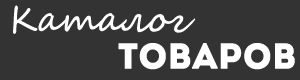
<style>
.page{position:relative;width:300px;height:80px;background:#333333}
.page>*{position:absolute;margin:0}
.t1{font:36px "SegoeScript";color:#ffffff}
.t2{font:36px "Intro";color:#ffffff}
</style>
<div class="page">
<p class="t1" style="left:13px;top:5px;width:183px;height:29px">Каталог</p>
<p class="t2" style="left:118px;top:43px;width:177px;height:27px">ТОВАРОВ</p>
</div>
